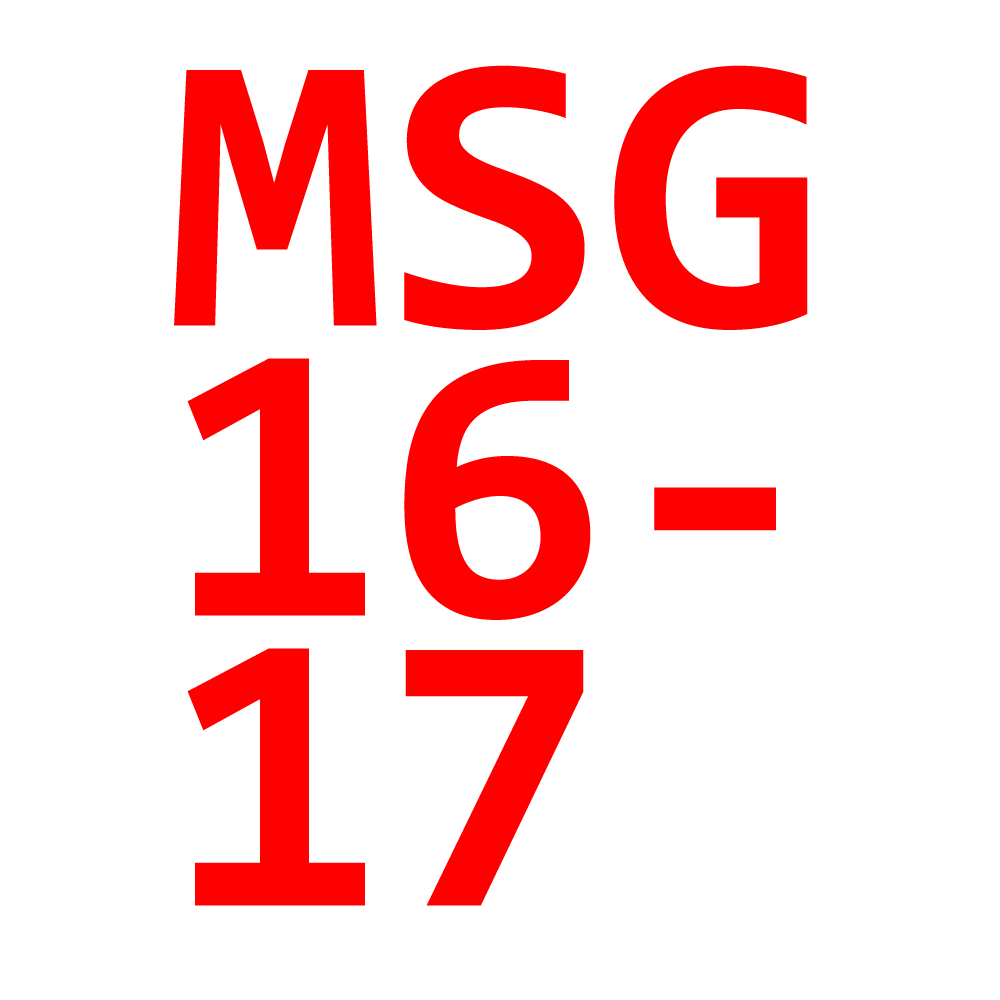
<style>
.page{position:relative;width:1000px;height:1000px;background:#ffffff}
.page>*{position:absolute;margin:0}
.t1{font:400px/290px "Consolas-Bold";color:#ff0000}
</style>
<div class="page">
<p class="t1" style="left:174px;top:65px;width:634px;height:841px">MSG<br>16-<br>17</p>
</div>
